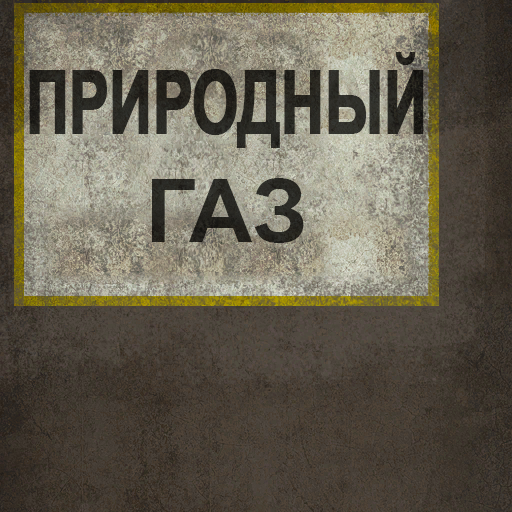
<style>
.page{position:relative;width:512px;height:512px}
.page>*{position:absolute;margin:0}
.t1{font:88px/109px "Arial-BoldMT";letter-spacing:-0.02em;color:#282721;font-weight:bold;scale:0.68 1}
.t2{font:88px/109px "Arial-BoldMT";color:#282721}
</style>
<div class="page">
<p class="t1" style="left:29px;top:52px;width:395px;height:191px;text-align:center">ПРИРОДНЫЙ<br><span class="t2">ГАЗ</span></p>
</div>
